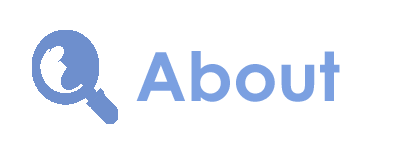
<style>
.page{position:relative;width:400px;height:150px;background:#ffffff}
.page>*{position:absolute;margin:0}
.t1{font:67.9px "CenturyGothic-Bold";color:#7ba0e1}
</style>
<div class="page">
<p class="t1" style="left:136px;top:51px;width:204px;height:51px">About</p>
</div>
